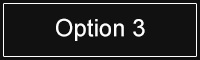
<style>
.page{position:relative;width:200px;height:60px;background:#111111}
.page>*{position:absolute;margin:0}
.t1{font:24px "ArialMT";color:#ffffff}
</style>
<div class="page">
<p class="t1" style="left:56px;top:18px;width:89px;height:23px">Option 3</p>
</div>
